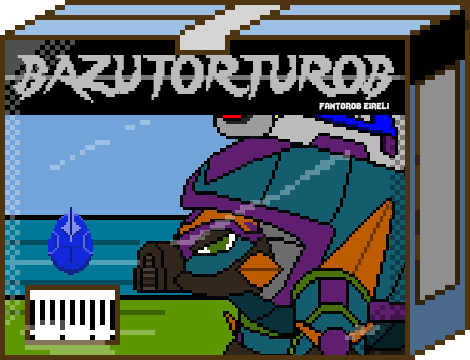
<style>
.page{position:relative;width:470px;height:360px}
.page>*{position:absolute;margin:0}
.t1{font:48px "Lady-Radical";color:#bbbbbb;scale:0.72 1}
.t2{font:12px "Lady-Radical";color:#fbfbfb}
</style>
<div class="page">
<p class="t1" style="left:13px;top:55px;width:381px;height:48px">BAZUTORTUROB</p>
<p class="t2" style="left:319px;top:102px;width:70px;height:8px">fantorob eireli</p>
</div>
